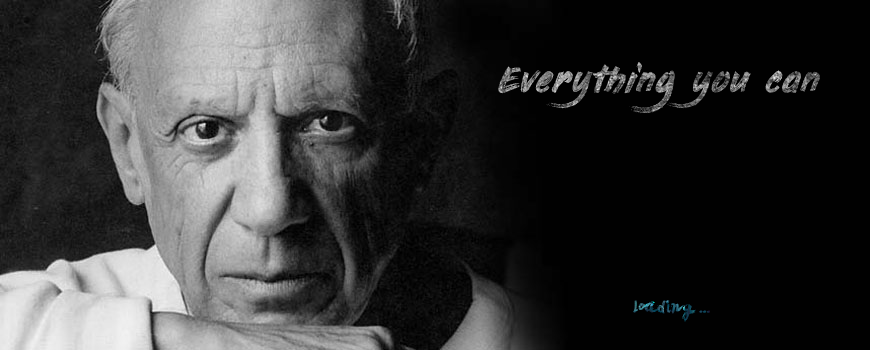
<style>
.page{position:relative;width:870px;height:350px;background:#010101}
.page>*{position:absolute;margin:0}
.t1{font:37.5px "PaintingWithChocolate"}
.t2{font:18.8px "LeviBrush"}
</style>
<div class="page">
<p class="t1" style="left:498px;top:62px;width:322px;height:52px">Everything you can</p>
<p class="t2" style="left:633px;top:300px;width:77px;height:22px">loading ...</p>
</div>
